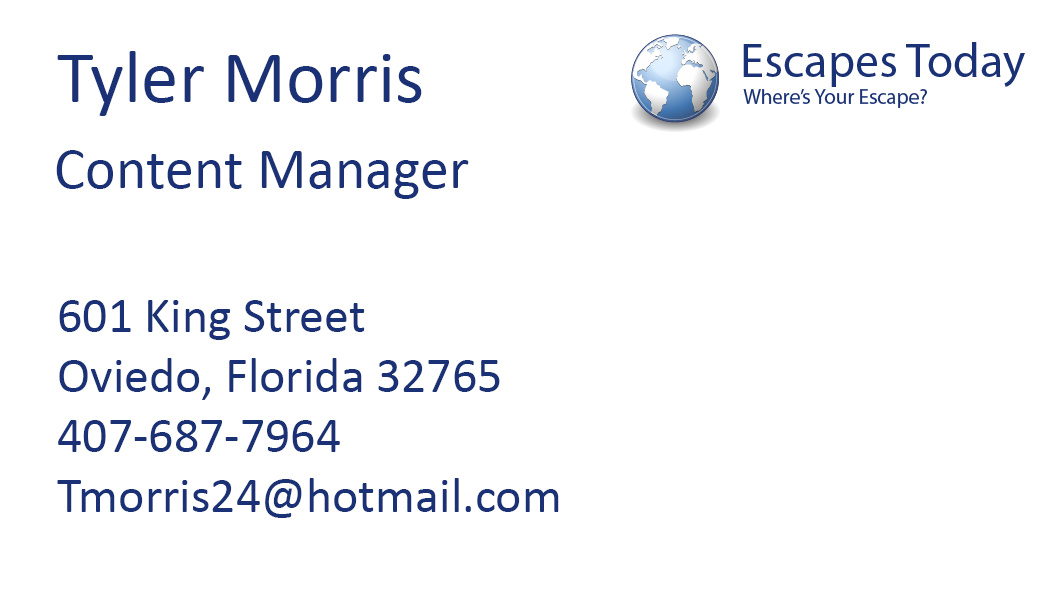
<style>
.page{position:relative;width:1050px;height:600px;background:#ffffff}
.page>*{position:absolute;margin:0}
.t1{font:75px "Calibri";color:#1a3275}
.t2{font:58.3px "Calibri";color:#1a3275}
.t3{font:50px "Calibri";color:#1a3275}
</style>
<div class="page">
<p class="t1" style="left:57px;top:51px;width:365px;height:65px">Tyler Morris</p>
<p class="t2" style="left:56px;top:150px;width:413px;height:49px">Content Manager</p>
<p class="t3" style="left:57px;top:300px;width:502px;height:218px">601 King Street<br>Oviedo, Florida 32765<br>407-687-7964<br>Tmorris24@hotmail.com</p>
</div>
